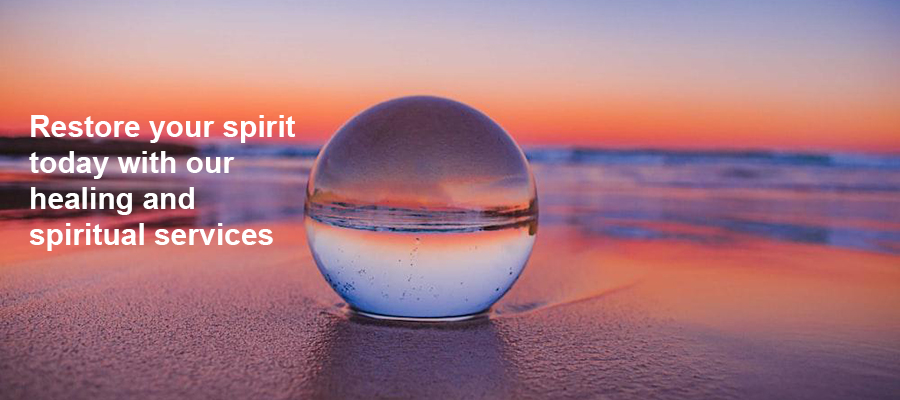
<style>
.page{position:relative;width:900px;height:400px}
.page>*{position:absolute;margin:0}
.t1{font:30px/36px "Arial-BoldMT";color:#ffffff}
</style>
<div class="page">
<p class="t1" style="left:29px;top:115px;width:267px;height:136px">Restore your spirit <br>today with our <br>healing and <br>spiritual services</p>
</div>
